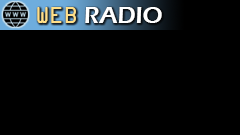
<style>
.page{position:relative;width:240px;height:135px;background:#000000}
.page>*{position:absolute;margin:0}
.t1{font:24px "ErasITC-Demi";color:#ffffff}
.t2{font:24px "OCRAExtended";color:#ffdf89}
</style>
<div class="page">
<p class="t1" style="left:37px;top:7px;width:125px;height:16px"><span class="t2">WEB</span> RADIO</p>
</div>
